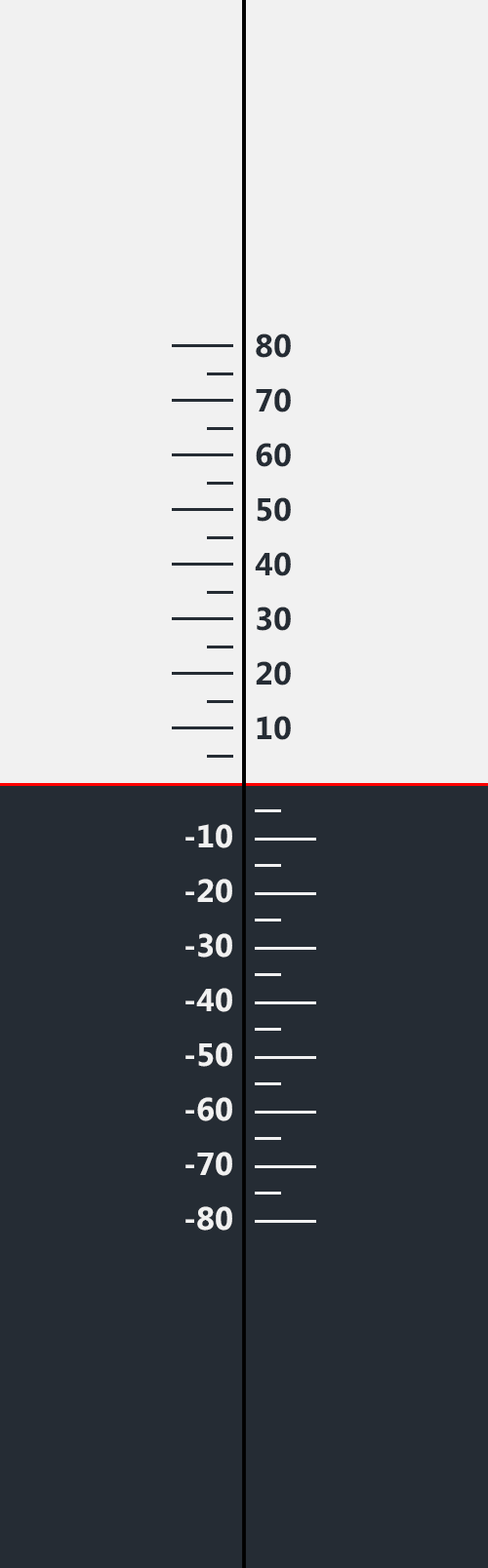
<style>
.page{position:relative;width:488px;height:1568px;background:#252c34}
.page>*{position:absolute;margin:0}
.t1{font:32.2px/54.6px "Segoe-Bold";color:#252c34}
.t2{font:32.2px/54.6px "Segoe-Bold";color:#f1f1f1}
</style>
<div class="page">
<p class="t1" style="left:255px;top:333px;width:36px;height:407px;text-align:center">80<br>70<br>60<br>50<br>40<br>30<br>20<br>10</p>
<p class="t2" style="left:185px;top:824px;width:47px;height:407px;text-align:center">-10<br>-20<br>-30<br>-40<br>-50<br>-60<br>-70<br>-80</p>
</div>
